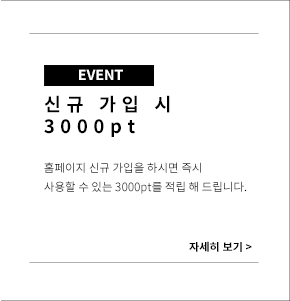
<style>
.page{position:relative;width:290px;height:301px;background:#ffffff}
.page>*{position:absolute;margin:0}
.t1{font:13.9px "NotoSansCJKkr-Bold";color:#ffffff}
.t2{font:18.2px/21.7px "NotoSansCJKkr-Bold";letter-spacing:0.3em;color:#000000}
.t3{font:11.3px "NotoSansCJKkr-DemiLight";color:#000000}
.t4{font:11px "NotoSansCJKkr-Bold";color:#000000}
</style>
<div class="page">
<p class="t1" style="left:79px;top:69px;width:44px;height:11px">EVENT</p>
<p class="t2" style="left:44px;top:95px;width:126px;height:42px">신규 가입 시<br>3000pt</p>
<p class="t3" style="left:44px;top:162px;width:203px;height:32px">홈페이지 신규 가입을 하시면 즉시<br>사용할 수 있는 3000pt를 적립 해 드립니다.</p>
<p class="t4" style="left:189px;top:241px;width:63px;height:11px">자세히 보기 &gt;</p>
</div>
